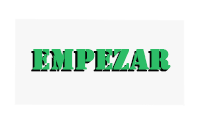
<style>
.page{position:relative;width:200px;height:125px;background:#f7f7f7}
.page>*{position:absolute;margin:0}
.t1{font:30px "Stencil";font-weight:bold}
.t2{font:30px "Stencil";color:#2dbd67;font-weight:bold}
</style>
<div class="page">
<p class="t1" style="left:31px;top:51px;width:138px;height:21px">EMPEZAR</p>
<p class="t2" style="left:33px;top:49px;width:138px;height:21px">EMPEZAR</p>
</div>
